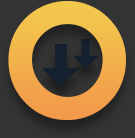
<style>
.page{position:relative;width:135px;height:138px;background:#333333}
.page>*{position:absolute;margin:0}
.t1{font:160.8px "AvantGardeITCbyBT-Demi";letter-spacing:0.04em;color:#f2b14b}
</style>
<div class="page">
<p class="t1" style="left:8px;top:1px;width:118px;height:119px">O</p>
</div>
